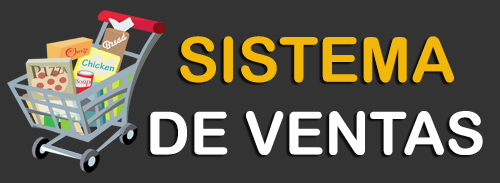
<style>
.page{position:relative;width:500px;height:183px;background:#333333}
.page>*{position:absolute;margin:0}
.t1{font:62px "ArialRoundedMTBold";color:#f1b80b}
.t2{font:59.3px "ArialRoundedMTBold";color:#fefefe}
</style>
<div class="page">
<p class="t1" style="left:180px;top:36px;width:274px;height:47px">SISTEMA</p>
<p class="t2" style="left:150px;top:111px;width:333px;height:44px">DE VENTAS</p>
</div>
